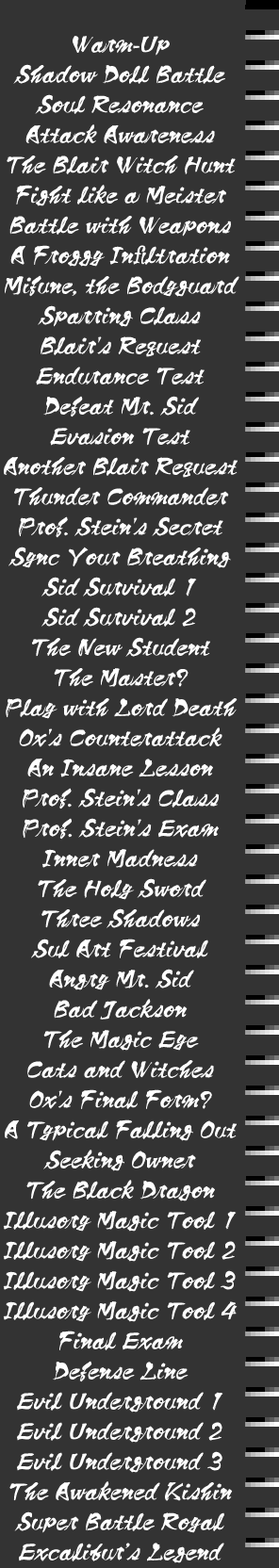
<style>
.page{position:relative;width:279px;height:1568px;background:#333333}
.page>*{position:absolute;margin:0}
.t1{font:22.6px/30.2px "SamuraiStd-R";color:#ffffff;font-style:italic}
</style>
<div class="page">
<p class="t1" style="left:3px;top:36px;width:236px;height:1527px;text-align:center">Warm-Up<br>Shadow Doll Battle<br>Soul Resonance<br>Attack Awareness<br>The Blair Witch Hunt<br>Fight like a Meister<br>Battle with Weapons<br>A Froggy Infiltration<br>Mifune, the Bodyguard<br>Sparring Class<br>Blair's Request<br>Endurance Test<br>Defeat Mr. Sid<br>Evasion Test<br>Another Blair Request<br>Thunder Commander<br>Prof. Stein's Secret<br>Sync Your Breathing<br>Sid Survival 1<br>Sid Survival 2<br>The New Student<br>The Master?<br>Play with Lord Death<br>Ox's Counterattack<br>An Insane Lesson<br>Prof. Stein's Class<br>Prof. Stein's Exam<br>Inner Madness<br>The Holy Sword<br>Three Shadows<br>Sul Art Festival<br>Angry Mr. Sid<br>Bad Jackson<br>The Magic Eye<br>Cats and Witches<br>Ox's Final Form?<br>A Typical Falling Out<br>Seeking Owner<br>The Black Dragon<br>Illusory Magic Tool 1<br>Illusory Magic Tool 2<br>Illusory Magic Tool 3<br>Illusory Magic Tool 4<br>Final Exam<br>Defense Line<br>Evil Underground 1<br>Evil Underground 2<br>Evil Underground 3<br>The Awakened Kishin<br>Super Battle Royal<br>Excalibur’s Legend</p>
</div>
